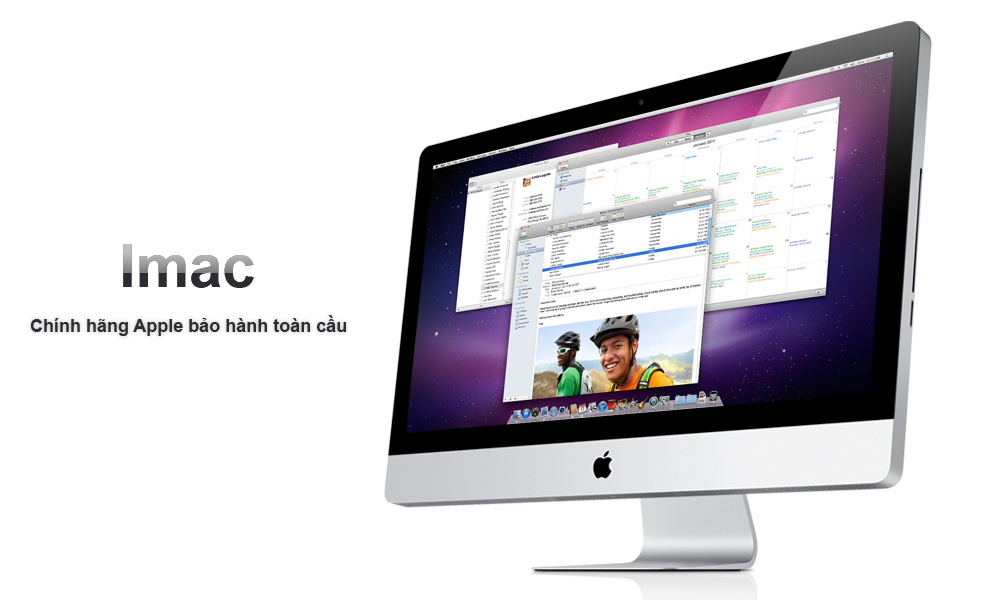
<style>
.page{position:relative;width:1004px;height:600px;background:#ffffff}
.page>*{position:absolute;margin:0}
.t1{font:18px "Arial-BoldMT";color:#2d2c31}
</style>
<div class="page">
<p class="t1" style="left:30px;top:315px;width:316px;height:21px">Chính hãng Apple bảo hành toàn cầu</p>
</div>
